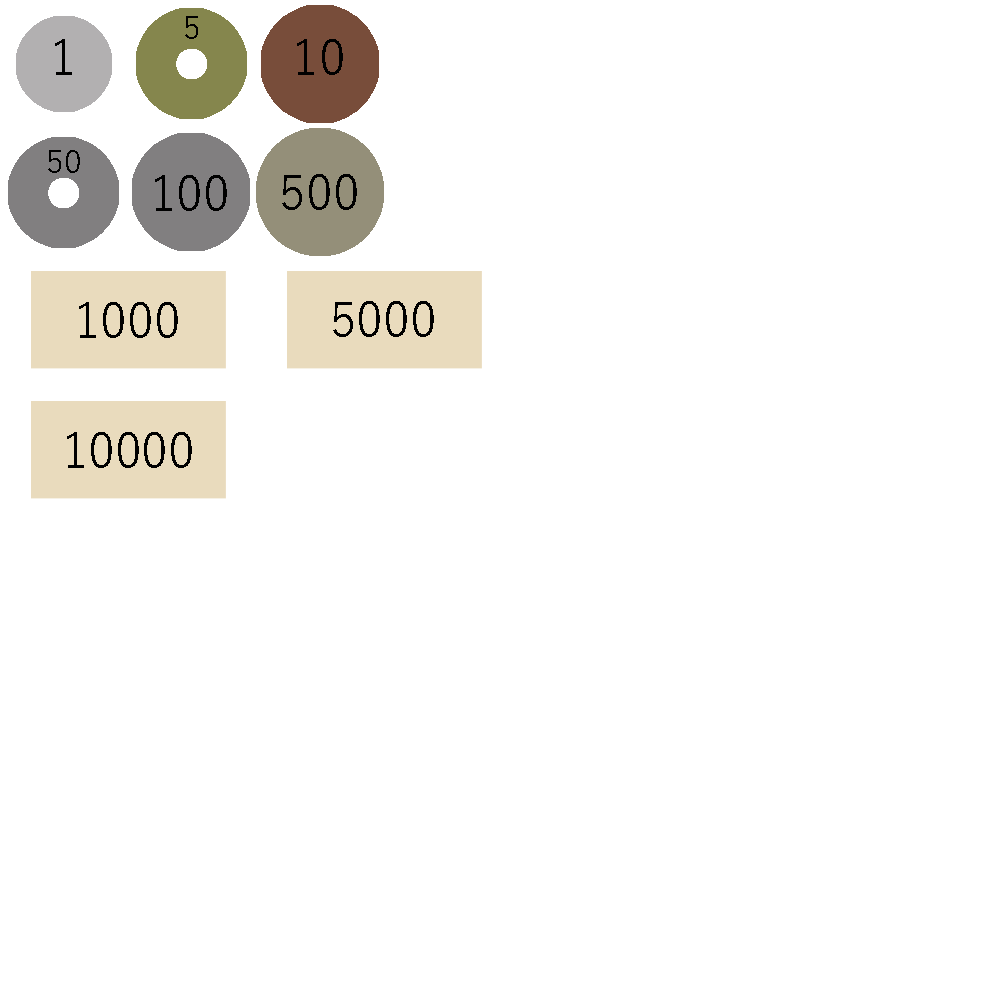
<style>
.page{position:relative;width:1000px;height:1000px;background:#ffffff}
.page>*{position:absolute;margin:0}
.t1{font:31.9px "YuGothic-Regular";color:#000000}
.t2{font:47.8px "YuGothic-Regular";color:#000000}
</style>
<div class="page">
<p class="t1" style="left:185px;top:16px;width:13px;height:23px">5</p>
<p class="t2" style="left:55px;top:39px;width:17px;height:36px">1</p>
<p class="t2" style="left:297px;top:39px;width:46px;height:36px">10</p>
<p class="t1" style="left:48px;top:150px;width:32px;height:23px">50</p>
<p class="t2" style="left:282px;top:174px;width:75px;height:36px">500</p>
<p class="t2" style="left:155px;top:175px;width:72px;height:36px">100</p>
<p class="t2" style="left:79px;top:302px;width:99px;height:36px">1000</p>
<p class="t2" style="left:333px;top:301px;width:101px;height:36px">5000</p>
<p class="t2" style="left:67px;top:432px;width:125px;height:36px">10000</p>
</div>
